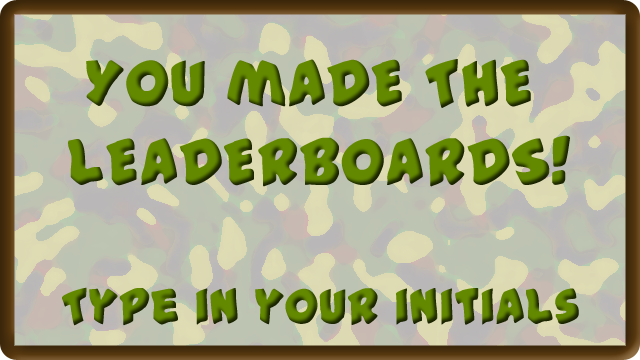
<style>
.page{position:relative;width:640px;height:360px}
.page>*{position:absolute;margin:0}
.t1{font:65.4px "#44Font"}
.t2{font:50px "#44Font"}
</style>
<div class="page">
<p class="t1" style="left:68px;top:59px;width:502px;height:128px;text-align:center">You mADE THE<br> lEADERBOARDS!</p>
<p class="t2" style="left:62px;top:287px;width:517px;height:39px">Type in your initials</p>
</div>
